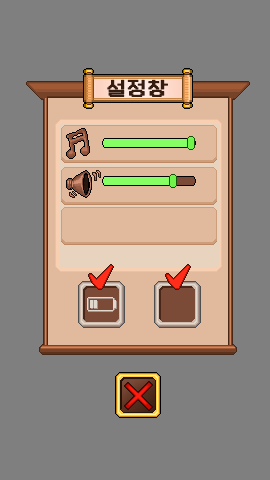
<style>
.page{position:relative;width:270px;height:480px;background:#7f7f7f}
.page>*{position:absolute;margin:0}
.t1{font:20px "NeoDunggeunmo-Regular";color:#341c0f;font-weight:bold}
</style>
<div class="page">
<p class="t1" style="left:107px;top:79px;width:61px;height:18px">설정창</p>
</div>
